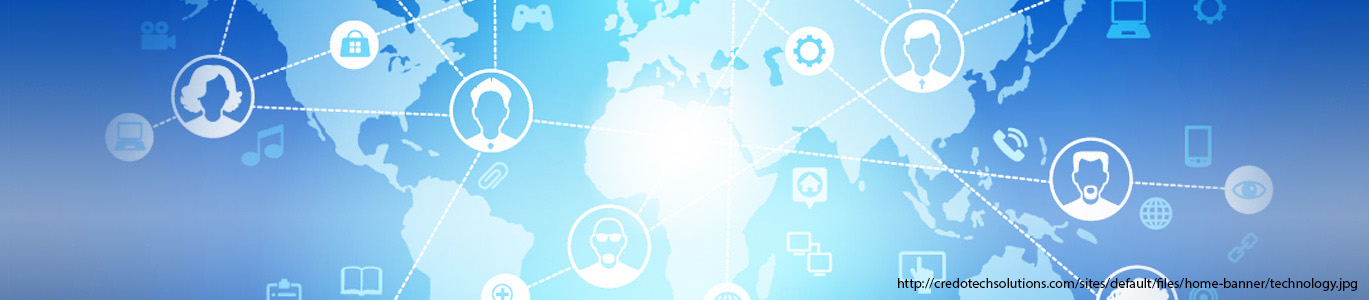
<style>
.page{position:relative;width:1369px;height:300px}
.page>*{position:absolute;margin:0}
.t1{font:14px "MyriadPro-Regular";color:#000000}
</style>
<div class="page">
<p class="t1" style="left:898px;top:278px;width:459px;height:13px">http://credotechsolutions.com/sites/default/files/home-banner/technology.jpg</p>
</div>
